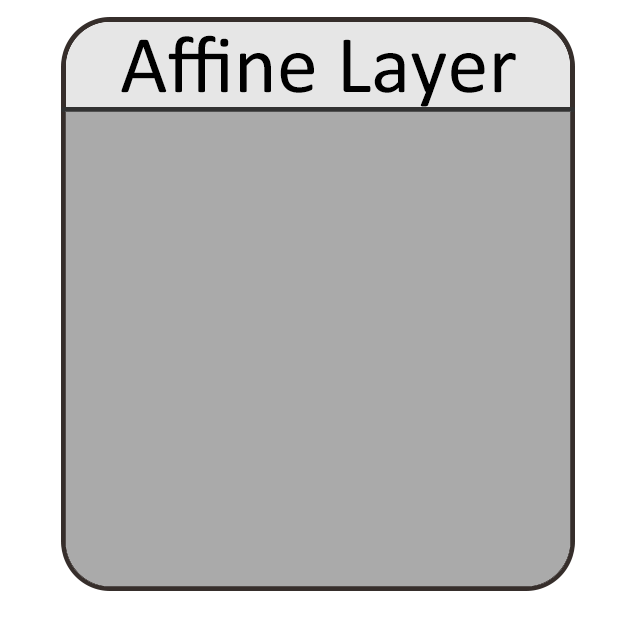
<style>
.page{position:relative;width:640px;height:640px;background:#aaaaaa}
.page>*{position:absolute;margin:0}
.t1{font:82.2px "Calibri";color:#000000}
</style>
<div class="page">
<p class="t1" style="left:121px;top:35px;width:395px;height:72px">Affine Layer</p>
</div>
